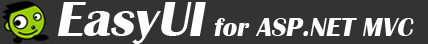
<style>
.page{position:relative;width:428px;height:44px;background:#333333}
.page>*{position:absolute;margin:0}
.t1{font:51px "BritannicBold";color:#ffffff;font-style:italic}
.t2{font:27px "BritannicBold";color:#ffffff;font-style:italic}
</style>
<div class="page">
<p class="t1" style="left:57px;top:2px;width:149px;height:42px">EasyUI</p>
<p class="t2" style="left:214px;top:18px;width:200px;height:18px">for ASP.NET MVC</p>
</div>
